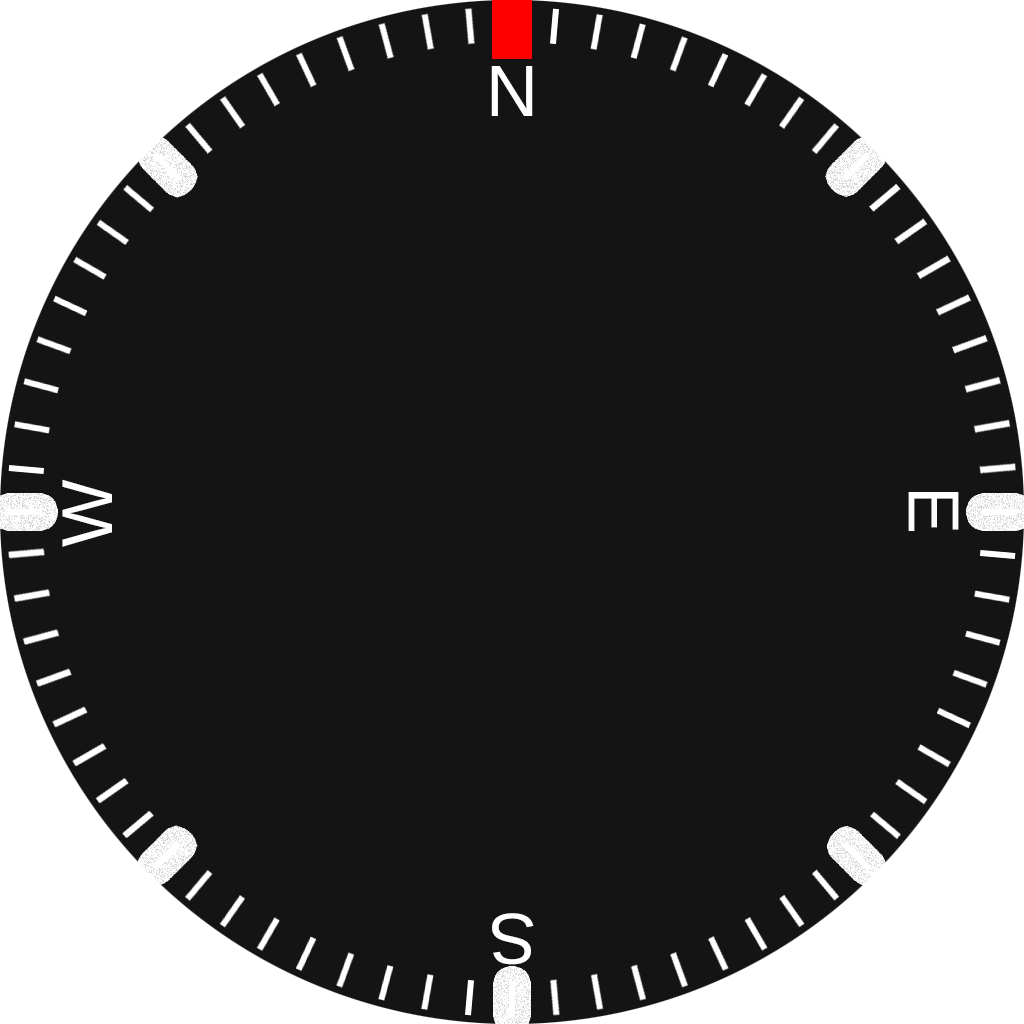
<style>
.page{position:relative;width:1024px;height:1024px;background:#141414}
.page>*{position:absolute;margin:0}
.t1{font:72px "LiberationSans";color:#ffffff}
</style>
<div class="page">
<p class="t1" style="left:491px;top:66px;width:42px;height:50px">N</p>
<p class="t1" style="left:62px;top:479px;width:50px;height:68px;rotate:-90deg">W</p>
<p class="t1" style="left:908px;top:492px;width:51px;height:39px;rotate:90deg">E</p>
<p class="t1" style="left:492px;top:913px;width:42px;height:52px;rotate:180deg">S</p>
</div>
